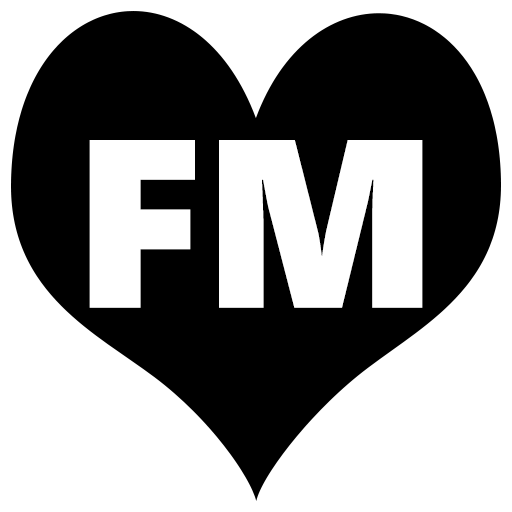
<style>
.page{position:relative;width:512px;height:512px;background:#ffffff}
.page>*{position:absolute;margin:0}
.t1{font:239.2px "SegoeUIBlack";color:#ffffff}
</style>
<div class="page">
<p class="t1" style="left:89px;top:140px;width:334px;height:168px">FM</p>
</div>
